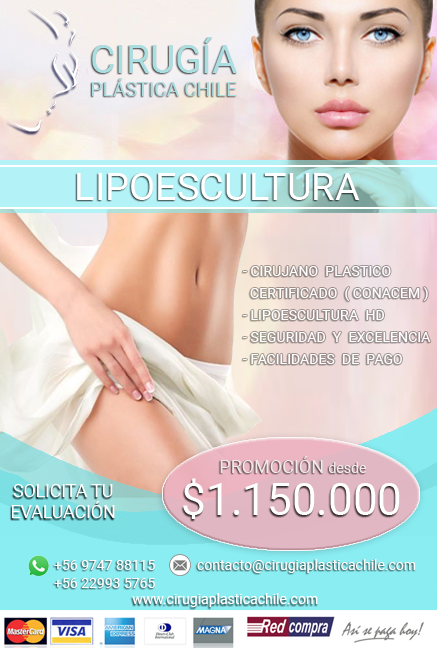
<style>
.page{position:relative;width:437px;height:648px}
.page>*{position:absolute;margin:0}
.t1{font:19.4px "Roboto-Regular";color:#abdee1}
.t2{font:38.8px "Roboto-Regular";color:#abdee1}
.t3{font:38px "Roboto-Regular";color:#ffffff}
.t4{font:14px/22px "Roboto-Regular";letter-spacing:0.005em;color:#fffefe}
.t5{font:18px "Roboto-Regular";color:#f0eaea}
.t6{font:14px "Roboto-Regular";color:#f0eaea}
.t7{font:18px "Roboto-Regular";letter-spacing:-0.01em;color:#ffffff}
.t8{font:44px "Roboto-Regular";color:#ffffff}
.t9{font:14px/18px "Roboto-Regular";color:#fcfcfc}
.t10{font:14px "Roboto-Regular";color:#fcfcfc}
.t11{font:14px "Roboto-Regular";color:#ffffff}
</style>
<div class="page">
<p class="t1" style="left:91px;top:37px;width:146px;height:59px;text-align:center"><span class="t2">CIRUGÍA<br></span>PLÁSTICA CHILE</p>
<p class="t3" style="left:77px;top:173px;width:283px;height:27px">LIPOESCULTURA</p>
<p class="t4" style="left:243px;top:266px;width:188px;height:98px">- CIRUJANO  PLASTICO <br>  CERTIFICADO  ( CONACEM )<br>- LIPOESCULTURA  HD<br>- SEGURIDAD  Y  EXCELENCIA<br>- FACILIDADES  DE  PAGO</p>
<p class="t5" style="left:220px;top:456px;width:146px;height:17px">PROMOCIÓN <span class="t6">desde</span></p>
<p class="t7" style="left:11px;top:484px;width:104px;height:34px;text-align:center">SOLICITA TU<br>EVALUACIÓN</p>
<p class="t8" style="left:183px;top:478px;width:217px;height:41px">$1.150.000</p>
<p class="t9" style="left:54px;top:560px;width:101px;height:28px">+56 9747 88115<br>+56 22993 5765</p>
<p class="t10" style="left:197px;top:559px;width:219px;height:14px">contacto@cirugiaplasticachile.com</p>
<p class="t11" style="left:132px;top:593px;width:186px;height:14px">www.cirugiaplasticachile.com</p>
</div>
